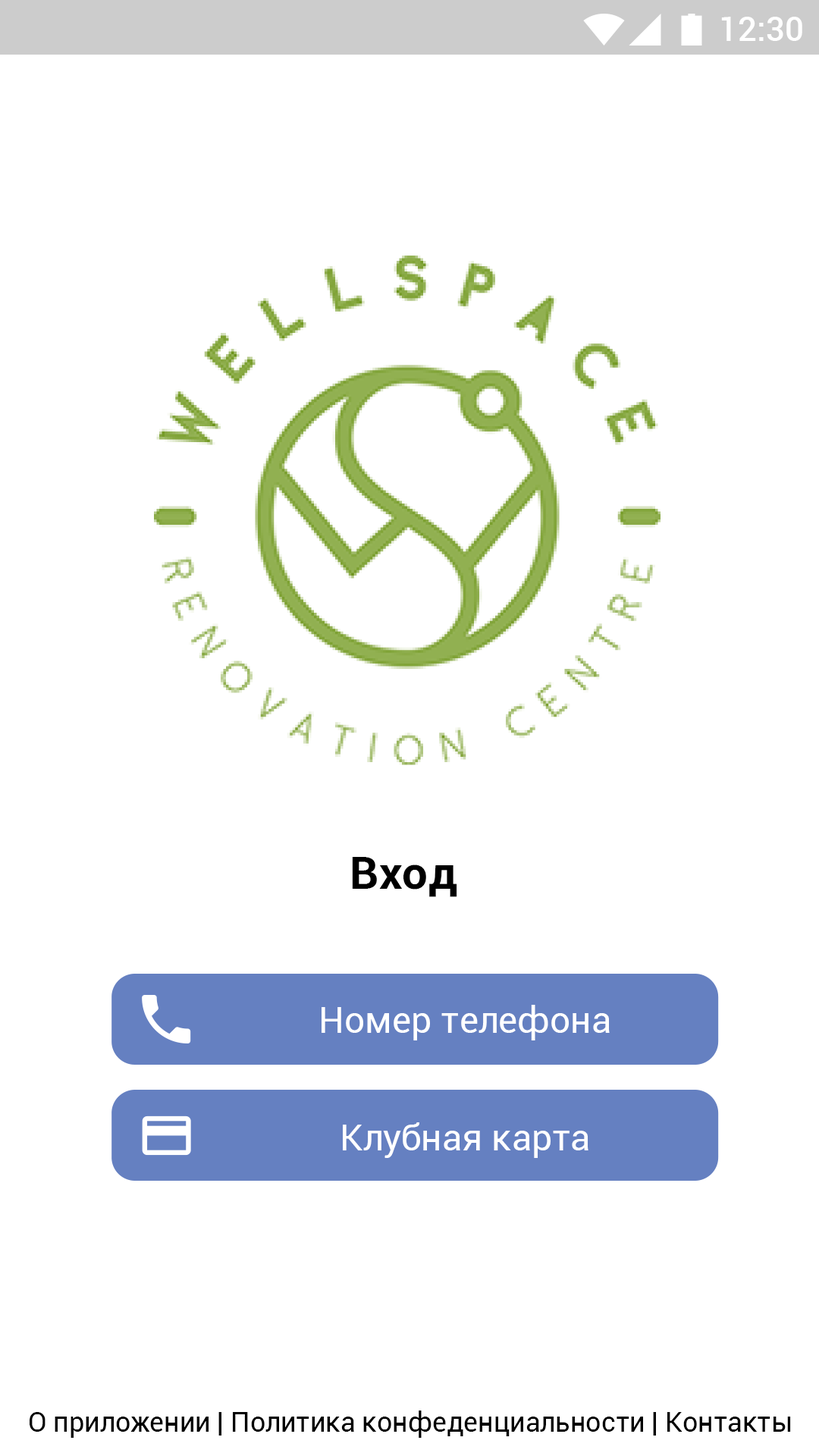
<style>
.page{position:relative;width:819px;height:1456px;background:#ffffff}
.page>*{position:absolute;margin:0}
.t1{font:33.4px "Roboto-Medium";color:#ffffff}
.t2{font:45.5px "Roboto-Bold";color:#000000}
.t3{font:36.4px "Roboto-Regular";color:#ffffff}
.t4{font:27.3px "Roboto-Regular";color:#000000}
</style>
<div class="page">
<p class="t1" style="left:721px;top:17px;width:81px;height:24px">12:30</p>
<p class="t2" style="left:352px;top:857px;width:105px;height:40px">Вход</p>
<p class="t3" style="left:322px;top:1005px;width:288px;height:35px">Номер телефона</p>
<p class="t3" style="left:343px;top:1122px;width:245px;height:36px">Клубная карта</p>
<p class="t4" style="left:30px;top:1410px;width:761px;height:28px">О приложении | Политика конфеденциальности | Контакты</p>
</div>
